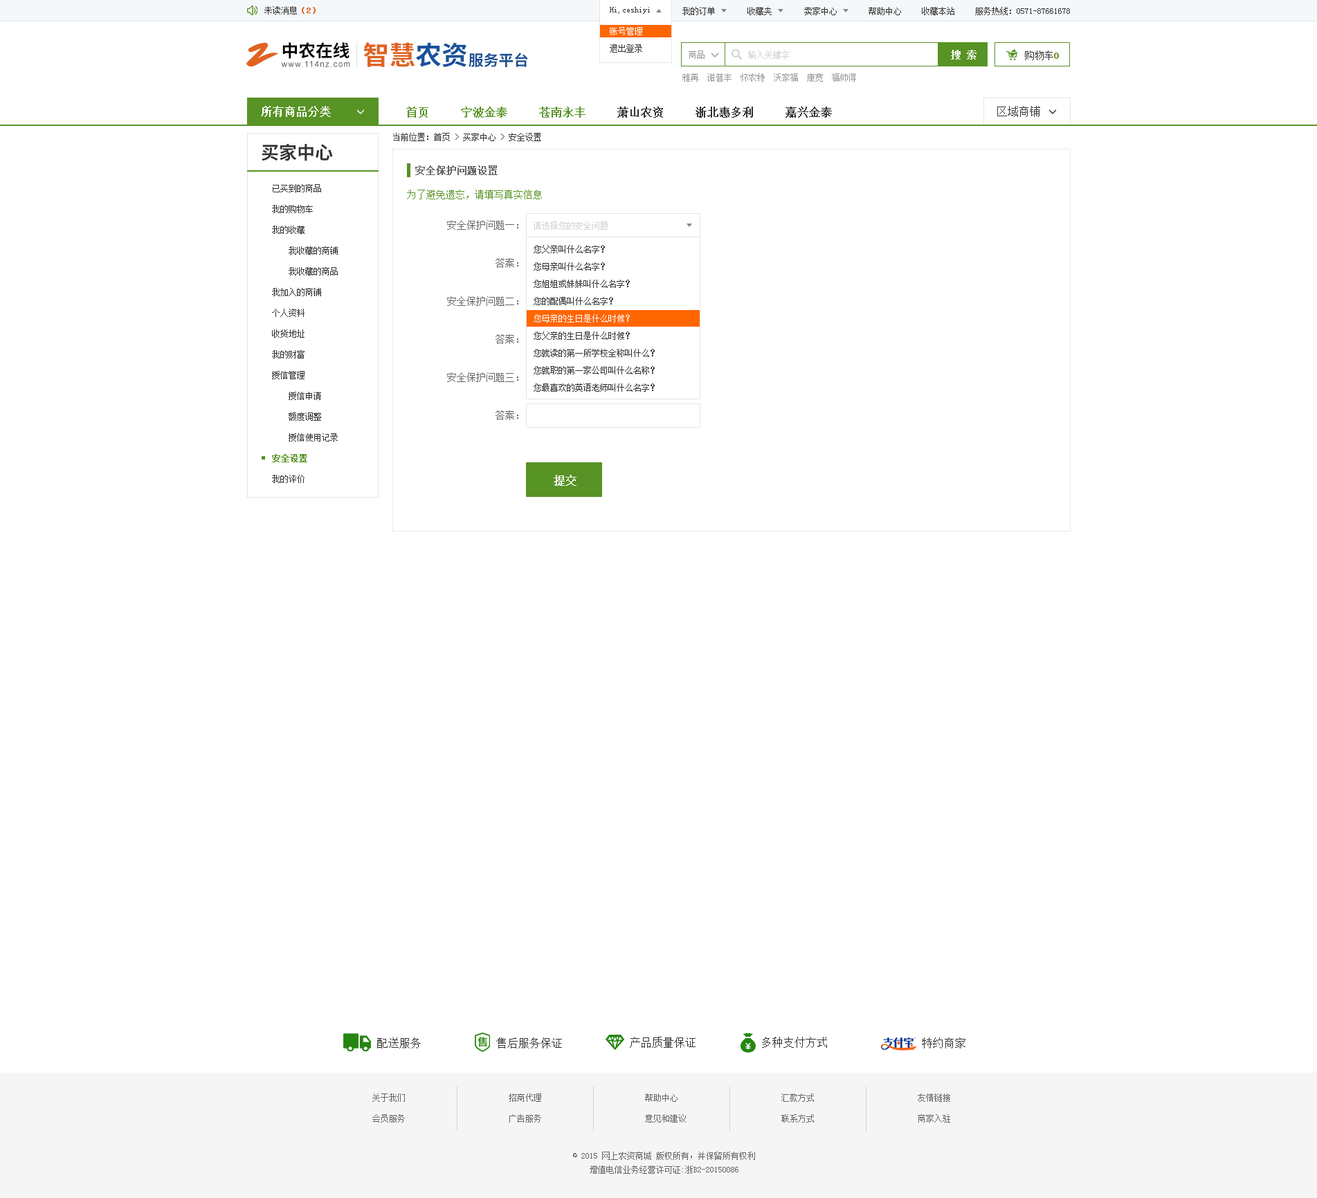
<style>
.page{position:relative;width:1317px;height:1198px;background:#ffffff}
.page>*{position:absolute;margin:0}
.t1{font:8.3px "SimSun";color:#333333}
.t2{font:8.3px "SimSun";color:#e0631f;font-weight:bold}
.t3{font:8.3px/17.3px "SimSun";color:#ffffff}
.t4{font:8.3px/17.3px "SimSun";color:#333333}
.t5{font:35.1px "SmudgerLetPlain";color:#e0631f}
.t6{font:17.1px "SourceHanSansCN-Bold";color:#060001}
.t7{font:26.2px "SourceHanSansCN-Bold";color:#e0631f}
.t8{font:26.2px "SourceHanSansCN-Bold";color:#1a529c}
.t9{font:15px "SourceHanSansCN-Bold";color:#194f93}
.t10{font:8.3px "SimSun";color:#999999}
.t11{font:8.3px "SimSun";color:#d1d1d1}
.t12{font:9.7px "SimSun";color:#ffffff;font-weight:bold}
.t13{font:9.7px "SimSun";color:#333333}
.t14{font:9.7px "SimSun";color:#589325;font-weight:bold}
.t15{font:8.2px "ArialMT";letter-spacing:0.1em;color:#585859}
.t16{font:11.1px "SimSun";color:#ffffff;font-weight:bold}
.t17{font:11.1px "SimSun";color:#333333;font-weight:bold}
.t18{font:11.1px "SimSun";color:#589325;font-weight:bold}
.t19{font:11.1px "SimSun";color:#333333}
.t20{font:18px "SourceHanSansCN-Bold";color:#333333}
.t21{font:9.7px "SimSun";color:#666666;font-weight:bold}
.t22{font:8.3px/20.8px "SimSun";color:#333333}
.t23{font:8.3px/20.8px "SimSun";color:#589325;font-weight:bold}
.t24{font:9.7px "SimSun";color:#589325}
.t25{font:9.7px "SimSun";color:#666666}
.t26{font:8.3px/20.8px "SimSun";color:#666666}
.t27{font:8.3px/13.8px "SimSun";color:#666666}
</style>
<div class="page">
<p class="t1" style="left:264px;top:6px;width:52px;height:9px">未读消息<span class="t2">（2）</span></p>
<p class="t1" style="left:610px;top:7px;width:40px;height:7px">Hi,ceshiyi</p>
<p class="t1" style="left:610px;top:7px;width:40px;height:7px">Hi,ceshiyi</p>
<p class="t1" style="left:683px;top:7px;width:32px;height:8px">我的订单</p>
<p class="t1" style="left:748px;top:7px;width:24px;height:8px">收藏夹</p>
<p class="t1" style="left:804px;top:7px;width:33px;height:8px">卖家中心</p>
<p class="t1" style="left:869px;top:7px;width:32px;height:8px">帮助中心</p>
<p class="t1" style="left:922px;top:7px;width:33px;height:8px">收藏本站</p>
<p class="t1" style="left:975px;top:7px;width:95px;height:8px">服务热线：0571-87661678</p>
<p class="t3" style="left:610px;top:27px;width:32px;height:26px">账号管理<br><span class="t4">退出登录</span></p>
<p class="t5" style="left:246px;top:42px;width:32px;height:25px">Z</p>
<p class="t6" style="left:282px;top:42px;width:68px;height:17px">中农在线</p>
<p class="t7" style="left:363px;top:42px;width:104px;height:25px">智慧<span class="t8">农资</span></p>
<p class="t9" style="left:469px;top:53px;width:59px;height:14px">服务平台</p>
<p class="t10" style="left:689px;top:51px;width:16px;height:8px">商品</p>
<p class="t11" style="left:748px;top:51px;width:41px;height:8px">输入关键字</p>
<p class="t12" style="left:951px;top:50px;width:26px;height:10px">搜 索</p>
<p class="t13" style="left:1025px;top:51px;width:34px;height:9px">购物车<span class="t14">0</span></p>
<p class="t15" style="left:281px;top:61px;width:69px;height:6px">www.114nz.com</p>
<p class="t10" style="left:683px;top:73px;width:173px;height:9px">雅苒  诺普丰  怀农特  沃家福  康宽  福帅得</p>
<p class="t16" style="left:261px;top:106px;width:70px;height:11px">所有商品分类</p>
<p class="t17" style="left:406px;top:107px;width:426px;height:11px"><span class="t18">首页     宁波金泰     苍南永丰    </span> 萧山农资     浙北惠多利     嘉兴金泰</p>
<p class="t19" style="left:998px;top:106px;width:43px;height:11px">区域商铺</p>
<p class="t1" style="left:393px;top:133px;width:148px;height:8px">当前位置：首页 &gt; 买家中心 &gt; 安全设置</p>
<p class="t20" style="left:262px;top:143px;width:71px;height:18px">买家中心</p>
<p class="t21" style="left:415px;top:165px;width:83px;height:10px">安全保护问题设置</p>
<p class="t22" style="left:272px;top:184px;width:66px;height:299px">已买到的商品<br>我的购物车<br>我的收藏<br>    我收藏的商铺<br>    我收藏的商品<br>我加入的商铺<br>个人资料<br>收货地址<br>我的财富<br>授信管理<br>    授信申请<br>    额度调整<br>    授信使用记录<br><span class="t23">安全设置<br></span>我的评价</p>
<p class="t24" style="left:407px;top:190px;width:135px;height:9px">为了避免遗忘，请填写真实信息</p>
<p class="t25" style="left:447px;top:220px;width:72px;height:10px">安全保护问题一：</p>
<p class="t11" style="left:534px;top:222px;width:74px;height:8px">请选择您的安全问题</p>
<p class="t4" style="left:534px;top:245px;width:121px;height:147px">您父亲叫什么名字？<br>您母亲叫什么名字？<br>您姐姐或妹妹叫什么名字？<br>您的配偶叫什么名字？<br><span class="t3">您母亲的生日是什么时候？<br></span>您父亲的生日是什么时候？<br>您就读的第一所学校全称叫什么？<br>您就职的第一家公司叫什么名称？<br>您最喜欢的英语老师叫什么名字？</p>
<p class="t25" style="left:496px;top:258px;width:23px;height:10px">答案：</p>
<p class="t25" style="left:447px;top:296px;width:72px;height:10px">安全保护问题二：</p>
<p class="t25" style="left:496px;top:334px;width:23px;height:10px">答案：</p>
<p class="t25" style="left:447px;top:372px;width:72px;height:10px">安全保护问题三：</p>
<p class="t25" style="left:496px;top:411px;width:23px;height:9px">答案：</p>
<p class="t16" style="left:554px;top:475px;width:23px;height:11px">提交</p>
<p class="t19" style="left:377px;top:1038px;width:44px;height:11px">配送服务</p>
<p class="t19" style="left:496px;top:1038px;width:66px;height:11px">售后服务保证</p>
<p class="t19" style="left:630px;top:1037px;width:66px;height:11px">产品质量保证</p>
<p class="t19" style="left:762px;top:1037px;width:65px;height:11px">多种支付方式</p>
<p class="t19" style="left:922px;top:1038px;width:44px;height:11px">特约商家</p>
<p class="t26" style="left:372px;top:1094px;width:33px;height:29px">关于我们<br>会员服务</p>
<p class="t26" style="left:509px;top:1094px;width:32px;height:29px">招商代理<br>广告服务</p>
<p class="t26" style="left:645px;top:1094px;width:41px;height:29px">帮助中心<br>意见和建议</p>
<p class="t26" style="left:782px;top:1094px;width:32px;height:29px">汇款方式<br>联系方式</p>
<p class="t26" style="left:918px;top:1094px;width:33px;height:29px">友情链接<br>商家入驻</p>
<p class="t27" style="left:573px;top:1152px;width:182px;height:22px;text-align:center">© 2015 网上农资商城 版权所有，并保留所有权利<br>增值电信业务经营许可证:浙B2-20150086</p>
</div>
